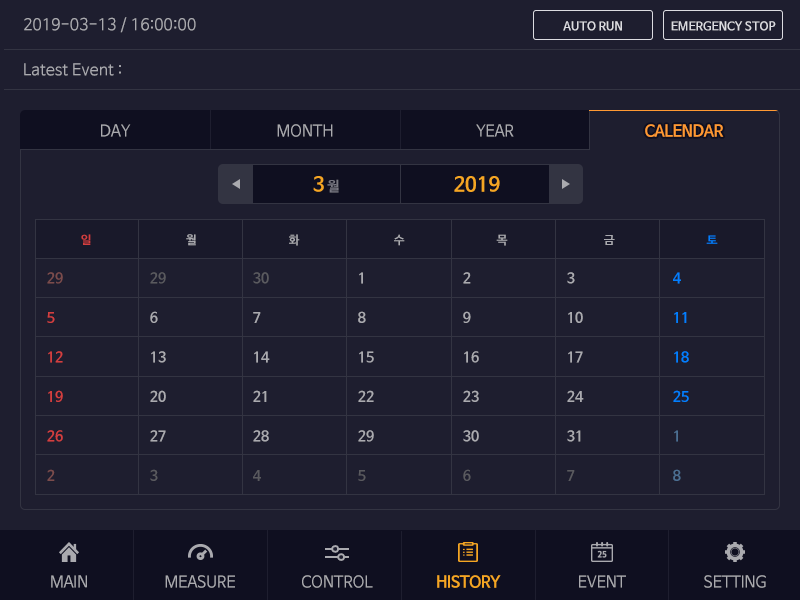
<style>
.page{position:relative;width:800px;height:600px;background:#1e1e2f}
.page>*{position:absolute;margin:0}
.t1{font:16px "NanumBarunGothic";color:#aaaaaf}
.t2{font:12px "NanumBarunGothicBold";color:#dcdce1}
.t3{font:16px "NanumBarunGothic";letter-spacing:-0.025em;color:#aaaaaf}
.t4{font:16px "NanumBarunGothicBold";letter-spacing:-0.025em;color:#ff9933}
.t5{font:20px "NanumBarunGothicBold";color:#f5a623}
.t6{font:14px "NanumBarunGothicBold";color:#787882}
.t7{font:12px "NanumBarunGothicBold";color:#d33f3f}
.t8{font:12px "NanumBarunGothicBold";color:#aaaaaf}
.t9{font:12px "NanumBarunGothicBold";color:#017fff}
.t10{font:14px/39.5px "NanumBarunGothicBold";color:#d33f3f}
.t11{font:14px/39.5px "NanumBarunGothicBold";color:#7b4c4c}
.t12{font:14px/39.5px "NanumBarunGothicBold";color:#aaaaaf}
.t13{font:14px/39.5px "NanumBarunGothicBold";color:#5a5a5f}
.t14{font:14px/39.5px "NanumBarunGothicBold";color:#017fff}
.t15{font:14px/39.5px "NanumBarunGothicBold";color:#4c6f92}
.t16{font:16px "NanumBarunGothicBold";letter-spacing:-0.025em;color:#f5a623}
</style>
<div class="page">
<p class="t1" style="left:24px;top:17px;width:172px;height:16px">2019-03-13 / 16:00:00</p>
<p class="t2" style="left:563px;top:21px;width:59px;height:10px">AUTO RUN</p>
<p class="t2" style="left:671px;top:21px;width:105px;height:10px">EMERGENCY STOP</p>
<p class="t1" style="left:24px;top:63px;width:97px;height:13px">Latest Event :</p>
<p class="t3" style="left:101px;top:124px;width:30px;height:13px">DAY</p>
<p class="t3" style="left:277px;top:124px;width:56px;height:13px">MONTH</p>
<p class="t3" style="left:476px;top:124px;width:38px;height:13px">YEAR</p>
<p class="t4" style="left:645px;top:124px;width:79px;height:13px">CALENDAR</p>
<p class="t5" style="left:313px;top:176px;width:26px;height:17px">3 <span class="t6">월</span></p>
<p class="t5" style="left:454px;top:176px;width:46px;height:16px">2019</p>
<p class="t7" style="left:81px;top:234px;width:10px;height:11px">일</p>
<p class="t8" style="left:186px;top:234px;width:10px;height:12px">월</p>
<p class="t8" style="left:289px;top:234px;width:11px;height:12px">화</p>
<p class="t8" style="left:394px;top:234px;width:11px;height:12px">수</p>
<p class="t8" style="left:496px;top:234px;width:12px;height:12px">목</p>
<p class="t8" style="left:604px;top:235px;width:11px;height:10px">금</p>
<p class="t9" style="left:706px;top:235px;width:12px;height:9px">토</p>
<p class="t10" style="left:47px;top:272px;width:16px;height:209px"><span class="t11">29<br></span>5<br>12<br>19<br>26<br><span class="t11">2</span></p>
<p class="t12" style="left:150px;top:272px;width:16px;height:209px"><span class="t13">29<br></span>6<br>13<br>20<br>27<br><span class="t13">3</span></p>
<p class="t12" style="left:253px;top:272px;width:17px;height:209px"><span class="t13">30<br></span>7<br>14<br>21<br>28<br><span class="t13">4</span></p>
<p class="t12" style="left:358px;top:272px;width:16px;height:209px">1<br>8<br>15<br>22<br>29<br><span class="t13">5</span></p>
<p class="t12" style="left:463px;top:272px;width:16px;height:209px">2<br>9<br>16<br>23<br>30<br><span class="t13">6</span></p>
<p class="t12" style="left:567px;top:272px;width:17px;height:209px">3<br>10<br>17<br>24<br>31<br><span class="t13">7</span></p>
<p class="t14" style="left:673px;top:272px;width:16px;height:209px">4<br>11<br>18<br>25<br><span class="t15">1<br>8</span></p>
<p class="t3" style="left:51px;top:575px;width:36px;height:13px">MAIN</p>
<p class="t3" style="left:165px;top:575px;width:70px;height:13px">MEASURE</p>
<p class="t3" style="left:302px;top:575px;width:71px;height:13px">CONTROL</p>
<p class="t16" style="left:437px;top:575px;width:64px;height:13px">HISTORY</p>
<p class="t3" style="left:579px;top:575px;width:47px;height:13px">EVENT</p>
<p class="t3" style="left:704px;top:575px;width:62px;height:13px">SETTING</p>
</div>
